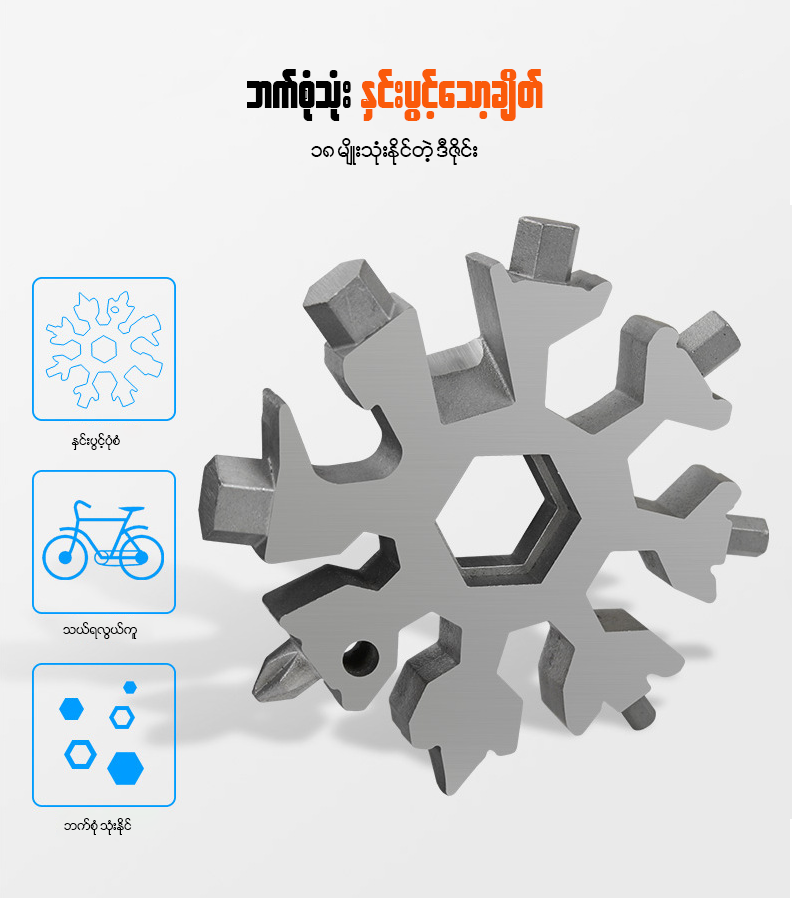
<style>
.page{position:relative;width:792px;height:898px}
.page>*{position:absolute;margin:0}
.t1{font:52.3px "W30ArtHouse";color:#fa5a0a}
.t2{font:52.3px "W30ArtHouse";color:#000000}
.t3{font:29.9px "W01ArtHouseWin";color:#000000}
.t4{font:18.6px "W01ArtHouseWin";color:#000000}
</style>
<div class="page">
<p class="t1" style="left:247px;top:69px;width:296px;height:52px"><span class="t2">bufpHkoHk; </span>ESif;yGifhaomhcsdwf</p>
<p class="t3" style="left:311px;top:138px;width:167px;height:27px">18 rsdK;oHk;EdkifwJh 'DZdkif;</p>
<p class="t4" style="left:71px;top:433px;width:49px;height:17px">ESif;yGifhyHkpH</p>
<p class="t4" style="left:63px;top:622px;width:74px;height:17px">o,f&amp;vG,ful</p>
<p class="t4" style="left:64px;top:818px;width:68px;height:17px">bufpHk oHk;Edkif</p>
</div>
